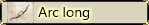
<style>
.page{position:relative;width:149px;height:25px;background:#d9d5bd}
.page>*{position:absolute;margin:0}
.t1{font:14px "LaoUI";color:#000000}
</style>
<div class="page">
<p class="t1" style="left:38px;top:7px;width:52px;height:13px">Arc long</p>
</div>
